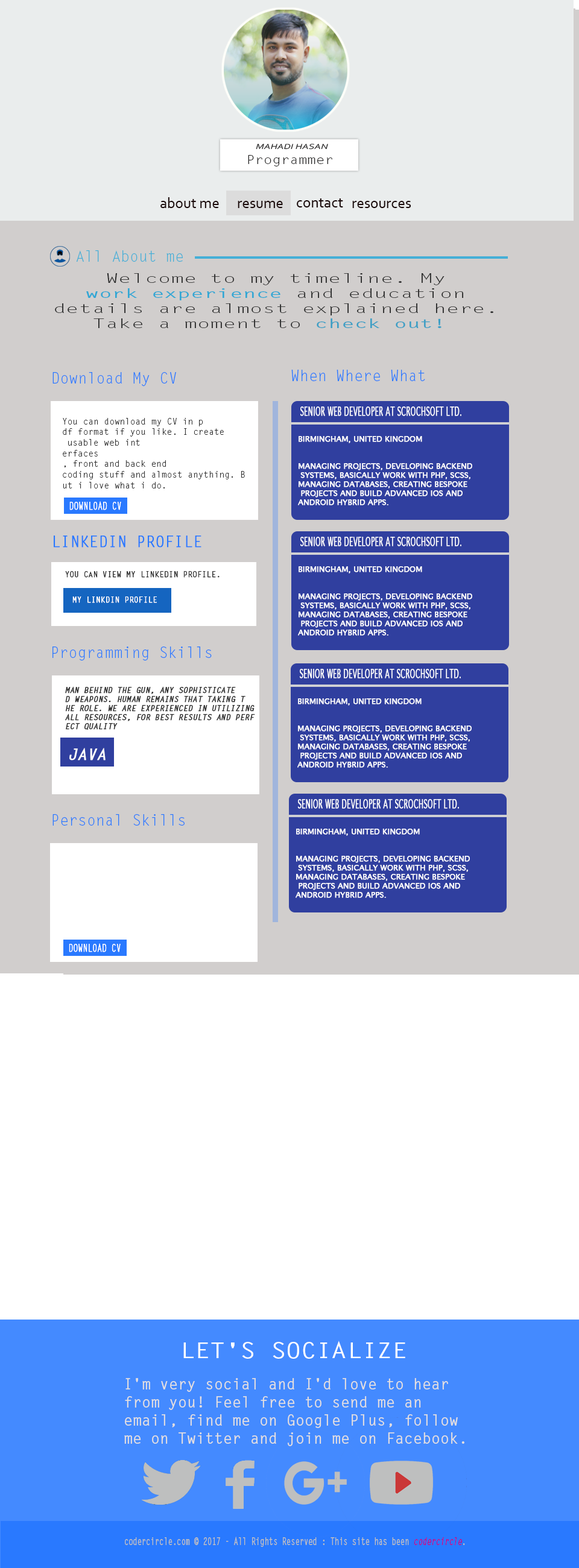
<style>
.page{position:relative;width:579px;height:1568px;background:#ffffff}
.page>*{position:absolute;margin:0}
.t1{font:7.7px "Corbel-Italic";color:#212020;scale:1.36 1}
.t2{font:12.2px "LetterGothicStd";color:#212020;scale:1.2 1}
.t3{font:15.1px "Corbel";color:#1a0909}
.t4{font:15.1px "LetterGothicStd";color:#45afd7}
.t5{font:12.5px "LetterGothicStd";color:#252626;scale:1.74 1}
.t6{font:12.5px "LetterGothicStd-Bold";color:#31a7d4;scale:1.74 1}
.t7{font:12.5px "LetterGothicStd-Bold";color:#3e9fc5;scale:1.74 1}
.t8{font:15.1px "LetterGothicStd";color:#2979ff}
.t9{font:11.9px "LucidaSans";color:#ffffff;text-transform:uppercase;font-weight:bold;scale:0.57 1}
.t10{font:8.9px "LetterGothicStd";color:#333333}
.t11{font:7.5px "LucidaSans";color:#ffffff;text-transform:uppercase;font-weight:bold}
.t12{font:10.5px "LetterGothicStd";color:#ffffff;text-transform:uppercase;font-weight:bold;scale:0.72 1}
.t13{font:15.1px "LetterGothicStd";color:#2979ff;text-transform:uppercase;font-weight:bold}
.t14{font:7.5px "LetterGothicStd";color:#333333;text-transform:uppercase;font-weight:bold}
.t15{font:7.5px "LetterGothicStd";color:#ffffff;text-transform:uppercase;font-weight:bold}
.t16{font:7.5px "LetterGothicStd-BoldSlanted";color:#333333;text-transform:uppercase;font-weight:bold}
.t17{font:7.5px "LetterGothicStd-BoldSlanted";color:#ffffff;text-transform:uppercase;font-weight:bold}
.t18{font:15.1px "LetterGothicStd-BoldSlanted";color:#ffffff;text-transform:uppercase;font-weight:bold}
.t19{font:22.2px "LetterGothicStd-Bold";color:#ffffff;scale:1.14 1}
.t20{font:15.1px "LetterGothicStd-Bold";color:#e3dfdf}
.t21{font:10.8px "LetterGothicStd-Bold";color:#bebfbf;scale:0.68 1}
.t22{font:10.8px "LetterGothicStd-BoldSlanted";color:#c1058a;scale:0.68 1}
</style>
<div class="page">
<p class="t1" style="left:256px;top:144px;width:72px;height:6px">MAHADI HASAN</p>
<p class="t2" style="left:248px;top:155px;width:84px;height:11px">Programmer</p>
<p class="t3" style="left:160px;top:197px;width:59px;height:11px">about me</p>
<p class="t3" style="left:238px;top:201px;width:45px;height:7px">resume</p>
<p class="t3" style="left:297px;top:198px;width:46px;height:9px">contact</p>
<p class="t3" style="left:352px;top:201px;width:59px;height:7px">resources</p>
<p class="t4" style="left:76px;top:250px;width:107px;height:12px">All About me</p>
<p class="t5" style="left:55px;top:273px;width:438px;height:55px;text-align:center">Welcome to my timeline. My <br><span class="t6">work experience</span> and education <br>details are almost explained here. <br>Take a moment to <span class="t7">check out!</span></p>
<p class="t8" style="left:52px;top:372px;width:124px;height:15px">Download My CV</p>
<p class="t8" style="left:291px;top:370px;width:134px;height:11px">When Where What</p>
<p class="t9" style="left:300px;top:406px;width:161px;height:10px">Senior Web Developer at Scrochsoft Ltd.</p>
<p class="t10" style="left:63px;top:418px;width:182px;height:70px">You can download my CV in p<br>df format if you like. I create<br> usable web int<br>erfaces<br>, front and back end <br>coding stuff and almost anything. B<br>ut i love what i do.</p>
<p class="t11" style="left:298px;top:436px;width:174px;height:69px">Birmingham, United Kingdom<br><br>Managing Projects, developing backend<br> systems, basically work with PHP, SCSS, <br>managing databases, creating bespoke<br> projects and build advanced iOS and <br>Android hybrid apps.</p>
<p class="t12" style="left:69px;top:501px;width:52px;height:9px">Download CV</p>
<p class="t13" style="left:54px;top:536px;width:147px;height:12px">LINKEDIN PROFILE</p>
<p class="t9" style="left:300px;top:537px;width:161px;height:9px">Senior Web Developer at Scrochsoft Ltd.</p>
<p class="t11" style="left:298px;top:566px;width:174px;height:70px">Birmingham, United Kingdom<br><br>Managing Projects, developing backend<br> systems, basically work with PHP, SCSS, <br>managing databases, creating bespoke<br> projects and build advanced iOS and <br>Android hybrid apps.</p>
<p class="t14" style="left:65px;top:571px;width:155px;height:7px">You can view my LinkedIn profile.</p>
<p class="t15" style="left:72px;top:596px;width:85px;height:7px">MY LINKDIN PROFILE</p>
<p class="t8" style="left:52px;top:646px;width:160px;height:15px">Programming Skills</p>
<p class="t9" style="left:300px;top:669px;width:161px;height:9px">Senior Web Developer at Scrochsoft Ltd.</p>
<p class="t16" style="left:65px;top:686px;width:190px;height:44px">Man behind the gun, any sophisticate<br>d weapons. Human remains that taking t<br>he role. We are experienced in utilizing <br>all resources, for best results and perf<br>ect quality<span class="t17">.</span></p>
<p class="t11" style="left:297px;top:698px;width:175px;height:70px">Birmingham, United Kingdom<br><br>Managing Projects, developing backend<br> systems, basically work with PHP, SCSS, <br>managing databases, creating bespoke<br> projects and build advanced iOS and <br>Android hybrid apps.</p>
<p class="t18" style="left:69px;top:748px;width:37px;height:12px">JAVA</p>
<p class="t9" style="left:298px;top:799px;width:161px;height:10px">Senior Web Developer at Scrochsoft Ltd.</p>
<p class="t8" style="left:52px;top:814px;width:133px;height:12px">Personal Skills</p>
<p class="t11" style="left:296px;top:829px;width:174px;height:69px">Birmingham, United Kingdom<br><br>Managing Projects, developing backend<br> systems, basically work with PHP, SCSS, <br>managing databases, creating bespoke<br> projects and build advanced iOS and <br>Android hybrid apps.</p>
<p class="t12" style="left:69px;top:943px;width:52px;height:9px">Download CV</p>
<p class="t19" style="left:183px;top:1341px;width:222px;height:18px">LET'S SOCIALIZE</p>
<p class="t20" style="left:124px;top:1378px;width:340px;height:68px">I'm very social and I'd love to hear <br>from you! Feel free to send me an <br>email, find me on Google Plus, follow<br>me on Twitter and join me on Facebook.</p>
<p class="t21" style="left:125px;top:1537px;width:340px;height:10px">codercircle.com © 2017 - All Rights Reserved : This site has been <span class="t22">codercircle</span>.</p>
</div>
